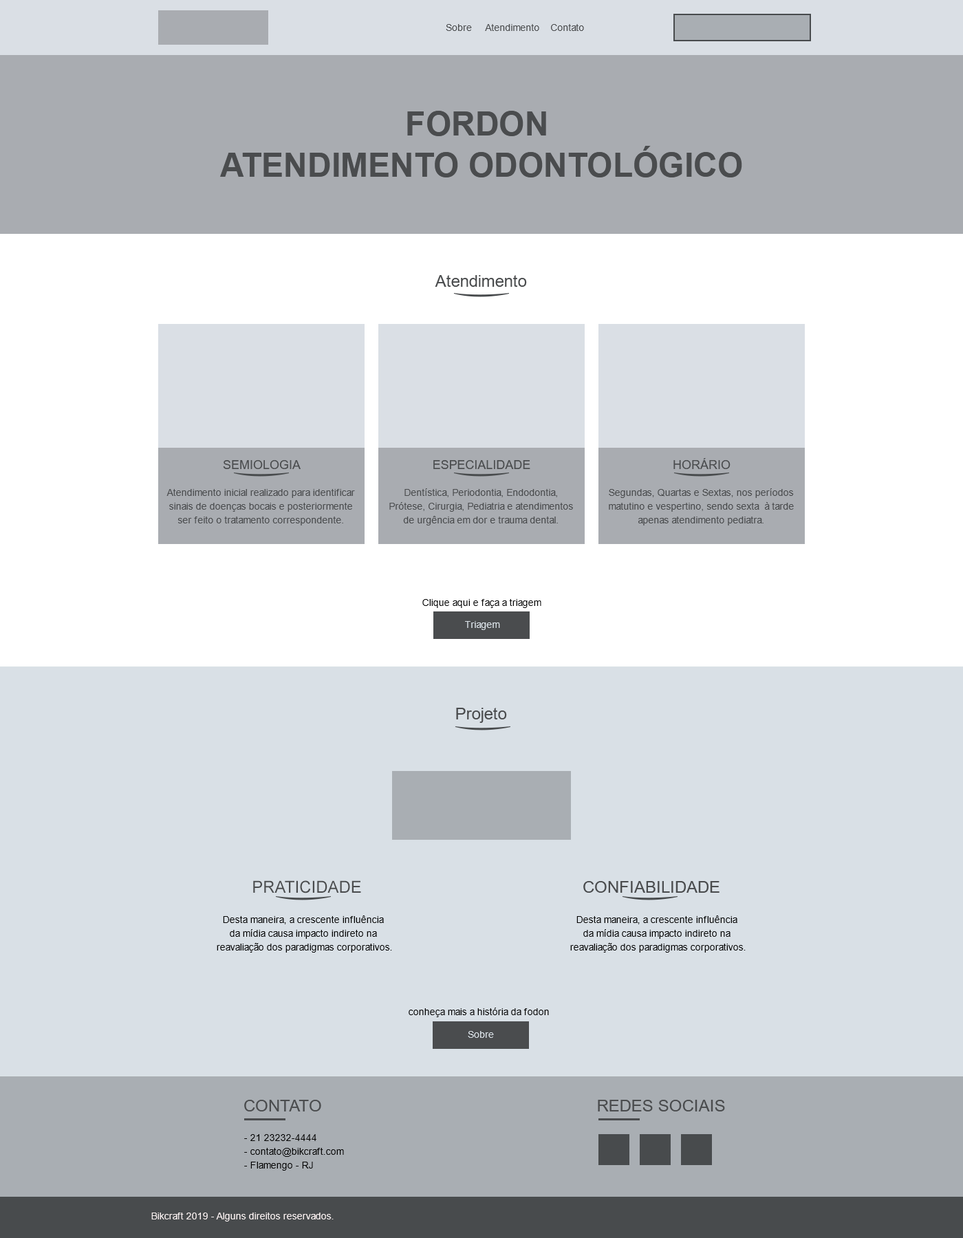
<style>
.page{position:relative;width:963px;height:1238px;background:#d9e0e6}
.page>*{position:absolute;margin:0}
.t1{font:9.6px "ArialMT";color:#4a4c4e}
.t2{font:33px/41.3px "Arial-BoldMT";color:#4a4c4e;text-transform:uppercase}
.t3{font:16.5px "ArialMT";color:#4a4c4e}
.t4{font:12.4px "ArialMT";color:#4a4c4e}
.t5{font:9.6px/13.8px "ArialMT";color:#4a4c4e}
.t6{font:9.6px "ArialMT";color:#000000}
.t7{font:9.6px "ArialMT";color:#d9e0e6}
.t8{font:9.6px/13.8px "ArialMT";color:#000000}
.t9{font:9.6px "ArialMT";color:#f9f0f0}
</style>
<div class="page">
<p class="t1" style="left:446px;top:24px;width:138px;height:7px">Sobre     Atendimento    Contato</p>
<p class="t2" style="left:220px;top:111px;width:522px;height:66px;text-align:center">FORDON <br>Atendimento ODONTOLÓGICO</p>
<p class="t3" style="left:435px;top:275px;width:92px;height:12px">Atendimento</p>
<p class="t4" style="left:223px;top:460px;width:78px;height:9px">SEMIOLOGIA</p>
<p class="t4" style="left:433px;top:460px;width:97px;height:9px">ESPECIALIDADE</p>
<p class="t4" style="left:673px;top:458px;width:58px;height:11px">HORÁRIO</p>
<p class="t5" style="left:166px;top:489px;width:189px;height:37px;text-align:center">Atendimento inicial realizado para identificar sinais de doenças bocais e posteriormente ser feito o tratamento correspondente.</p>
<p class="t5" style="left:389px;top:488px;width:184px;height:38px;text-align:center">Dentística, Periodontia, Endodontia, Prótese, Cirurgia, Pediatria e atendimentos de urgência em dor e trauma dental.</p>
<p class="t5" style="left:609px;top:488px;width:185px;height:38px;text-align:center">Segundas, Quartas e Sextas, nos períodos matutino e vespertino, sendo sexta  à tarde apenas atendimento pediatra.</p>
<p class="t6" style="left:422px;top:599px;width:119px;height:9px">Clique aqui e faça a triagem</p>
<p class="t7" style="left:465px;top:621px;width:35px;height:9px">Triagem</p>
<p class="t3" style="left:456px;top:708px;width:51px;height:15px">Projeto</p>
<p class="t3" style="left:253px;top:880px;width:108px;height:14px">PRATICIDADE</p>
<p class="t3" style="left:583px;top:881px;width:137px;height:12px">CONFIABILIDADE</p>
<p class="t8" style="left:217px;top:916px;width:175px;height:37px;text-align:center">Desta maneira, a crescente influência <br>da mídia causa impacto indireto na <br>reavaliação dos paradigmas corporativos.</p>
<p class="t8" style="left:570px;top:916px;width:176px;height:37px;text-align:center">Desta maneira, a crescente influência <br>da mídia causa impacto indireto na <br>reavaliação dos paradigmas corporativos.</p>
<p class="t6" style="left:409px;top:1008px;width:140px;height:9px">conheça mais a história da fodon</p>
<p class="t7" style="left:468px;top:1031px;width:26px;height:7px">Sobre</p>
<p class="t3" style="left:244px;top:1100px;width:77px;height:12px">CONTATO</p>
<p class="t3" style="left:598px;top:1100px;width:127px;height:12px">REDES SOCIAIS</p>
<p class="t8" style="left:244px;top:1134px;width:100px;height:37px">- 21 23232-4444<br>- contato@bikcraft.com<br>- Flamengo - RJ</p>
<p class="t9" style="left:151px;top:1213px;width:183px;height:9px">Bikcraft 2019 - Alguns direitos reservados.</p>
</div>
